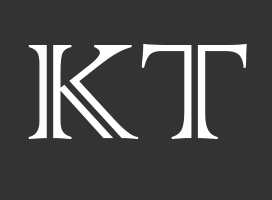
<style>
.page{position:relative;width:272px;height:200px;background:#333333}
.page>*{position:absolute;margin:0}
.t1{font:179.7px "ColonnaMT";color:#ffffff}
</style>
<div class="page">
<p class="t1" style="left:28px;top:43px;width:219px;height:96px">KT</p>
</div>
